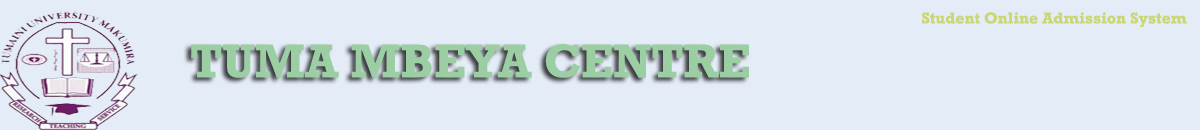
<style>
.page{position:relative;width:1200px;height:130px;background:#e4ecf7}
.page>*{position:absolute;margin:0}
.t1{font:16px "Rockwell-Bold";color:#cad773}
.t2{font:48px "Rockwell-Bold";color:#9ccea4}
</style>
<div class="page">
<p class="t1" style="left:921px;top:12px;width:266px;height:15px">Student Online Admission System</p>
<p class="t2" style="left:191px;top:44px;width:558px;height:34px">TUMA MBEYA CENTRE</p>
</div>
